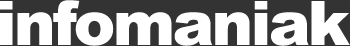
<style>
.page{position:relative;width:350px;height:46px;background:#ffffff}
.page>*{position:absolute;margin:0}
.t1{font:61.1px "Arial-Black";letter-spacing:-0.04em;color:#ffffff}
</style>
<div class="page">
<p class="t1" style="left:0px;top:0px;width:350px;height:46px">infomaniak</p>
</div>
